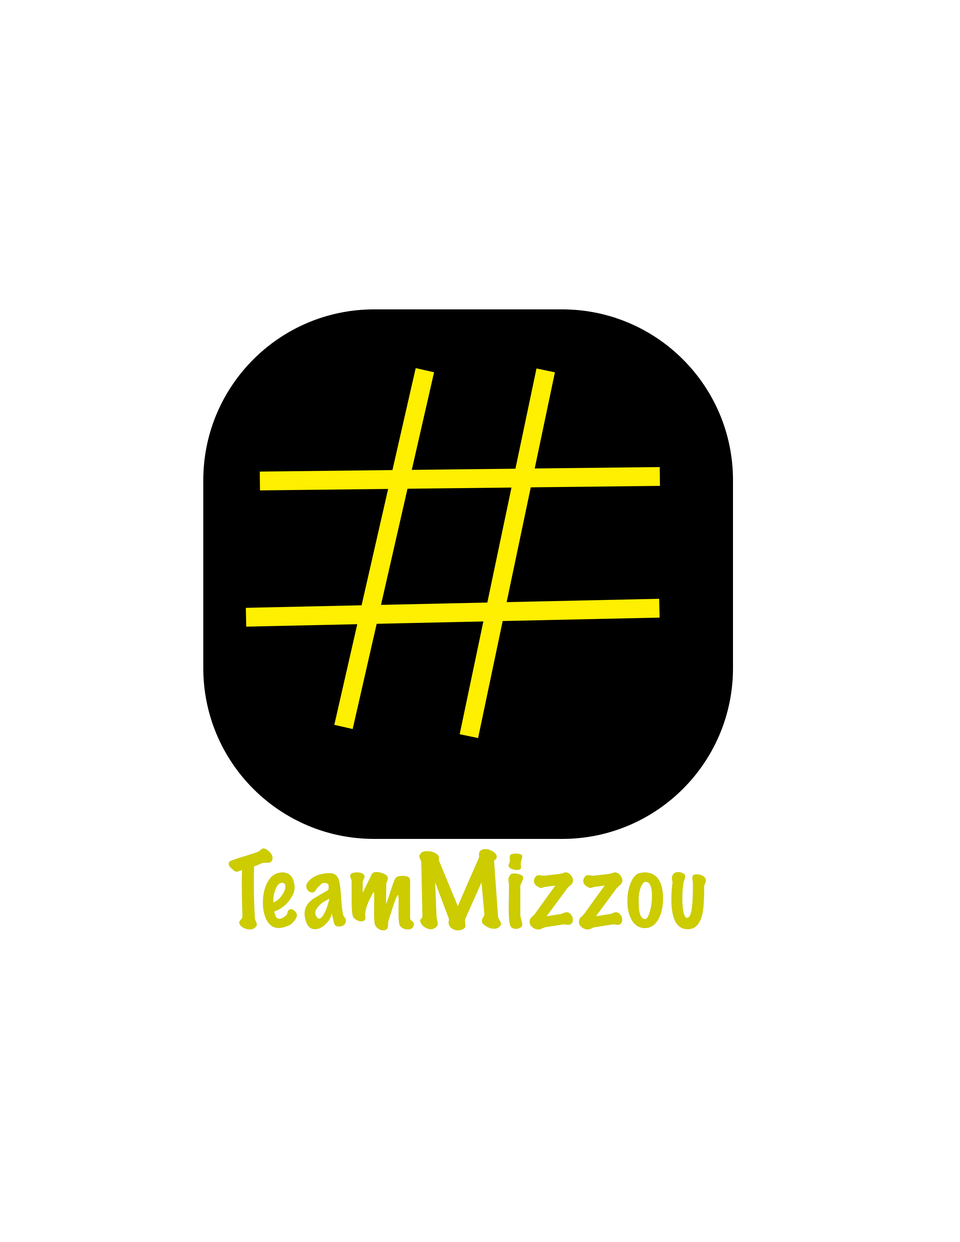
<style>
.page{position:relative;width:960px;height:1242px;background:#ffffff}
.page>*{position:absolute;margin:0}
.t1{font:94.1px "MarkerFelt-Thin";color:#cccc00}
</style>
<div class="page">
<p class="t1" style="left:228px;top:848px;width:478px;height:83px">TeamMizzou</p>
</div>
